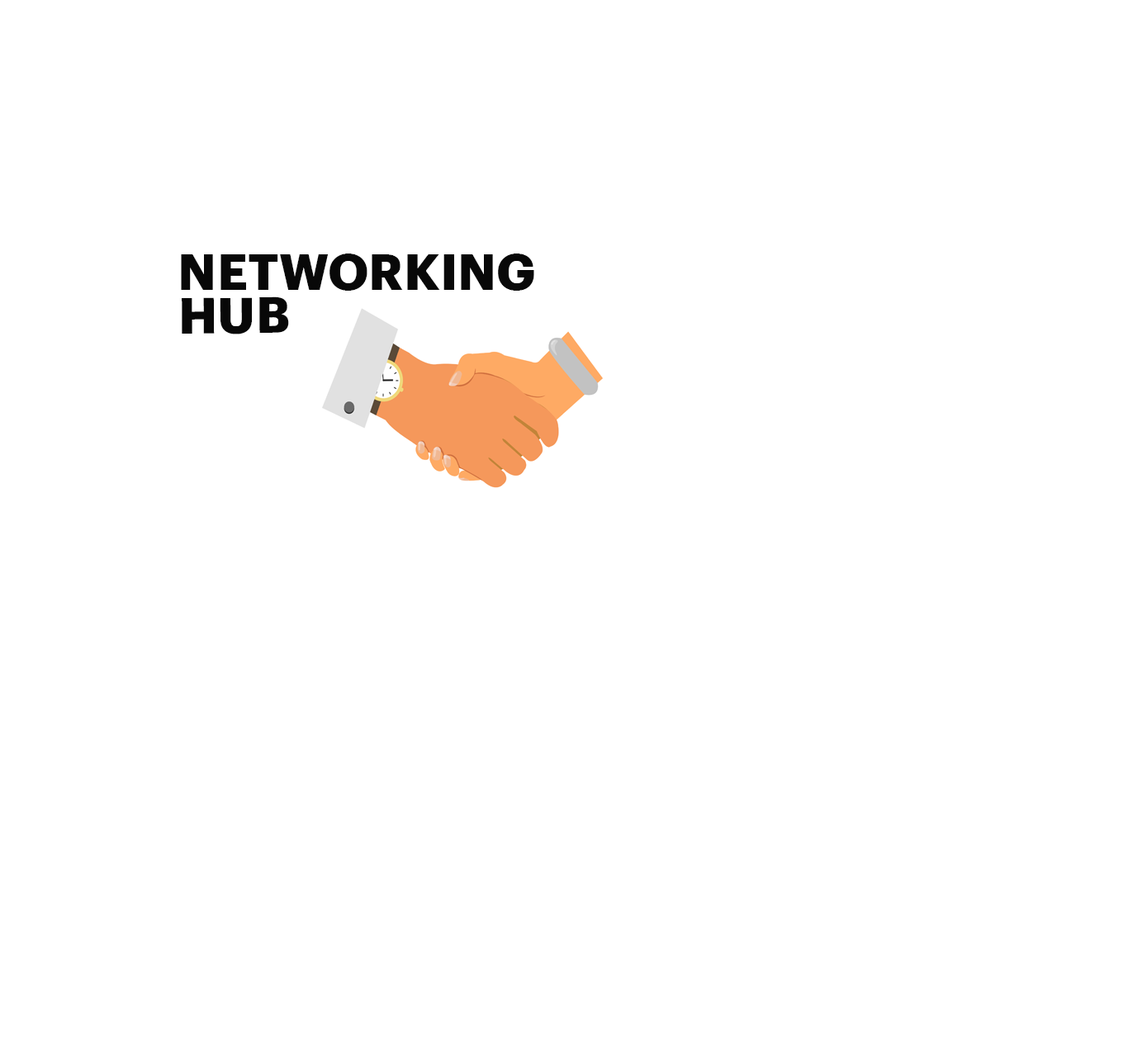
<style>
.page{position:relative;width:1128px;height:1057px;background:#ffffff}
.page>*{position:absolute;margin:0}
.t1{font:49.5px "Graphik-Bold";color:#080808}
</style>
<div class="page">
<p class="t1" style="left:181px;top:254px;width:353px;height:37px">NETWORKING</p>
<p class="t1" style="left:182px;top:296px;width:107px;height:38px">HUB</p>
</div>
